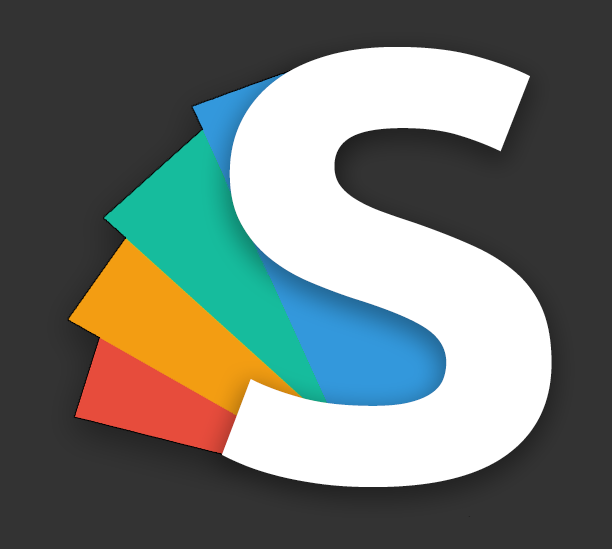
<style>
.page{position:relative;width:612px;height:549px;background:#333333}
.page>*{position:absolute;margin:0}
.t1{font:869.3px "Ubuntu-Bold";letter-spacing:-0.005em;color:#ffffff;font-variant:small-caps;scale:1.07 1}
</style>
<div class="page">
<p class="t1" style="left:222px;top:47px;width:330px;height:440px">s</p>
</div>
